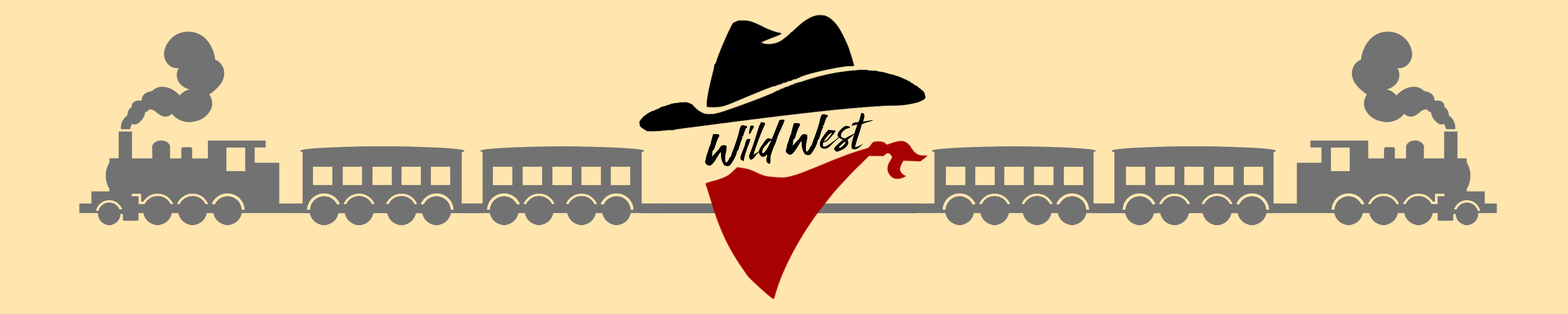
<style>
.page{position:relative;width:1568px;height:314px;background:#ffe5ae}
.page>*{position:absolute;margin:0}
.t1{font:45.8px "Wildwest";color:#000000}
</style>
<div class="page">
<p class="t1" style="left:705px;top:113px;width:168px;height:53px;rotate:-8deg">Wild West</p>
</div>
